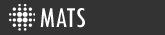
<style>
.page{position:relative;width:165px;height:35px;background:#333333}
.page>*{position:absolute;margin:0}
.t1{font:30px "TwCenMT-Condensed";color:#ffffff}
</style>
<div class="page">
<p class="t1" style="left:40px;top:8px;width:45px;height:20px">MATS</p>
</div>
